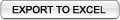
<style>
.page{position:relative;width:120px;height:20px}
.page>*{position:absolute;margin:0}
.t1{font:9.9px "ArialMT";color:#000000}
</style>
<div class="page">
<p class="t1" style="left:12px;top:5px;width:94px;height:9px">EXPORT TO EXCEL</p>
</div>
